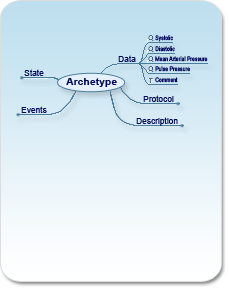
<style>
.page{position:relative;width:230px;height:290px}
.page>*{position:absolute;margin:0}
.t1{font:6.2px "ArialNarrow";color:#000757}
.t2{font:8.2px "ArialMT";color:#000757}
.t3{font:10.4px "Arial-BoldMT";color:#000757}
.t4{font:8.3px "ArialMT";color:#000757}
</style>
<div class="page">
<p class="t1" style="left:155px;top:35px;width:18px;height:7px">Systolic</p>
<p class="t1" style="left:155px;top:46px;width:20px;height:6px">Diastolic</p>
<p class="t2" style="left:118px;top:55px;width:18px;height:7px">Data</p>
<p class="t1" style="left:155px;top:56px;width:53px;height:6px">Mean Arterial Pressure</p>
<p class="t2" style="left:24px;top:69px;width:20px;height:7px">State</p>
<p class="t3" style="left:66px;top:78px;width:51px;height:9px">Archetype</p>
<p class="t1" style="left:155px;top:66px;width:35px;height:6px">Pulse Pressure</p>
<p class="t1" style="left:155px;top:77px;width:23px;height:6px">Comment</p>
<p class="t4" style="left:143px;top:95px;width:31px;height:7px">Protocol</p>
<p class="t2" style="left:21px;top:106px;width:26px;height:7px">Events</p>
<p class="t4" style="left:136px;top:117px;width:42px;height:9px">Description</p>
</div>
